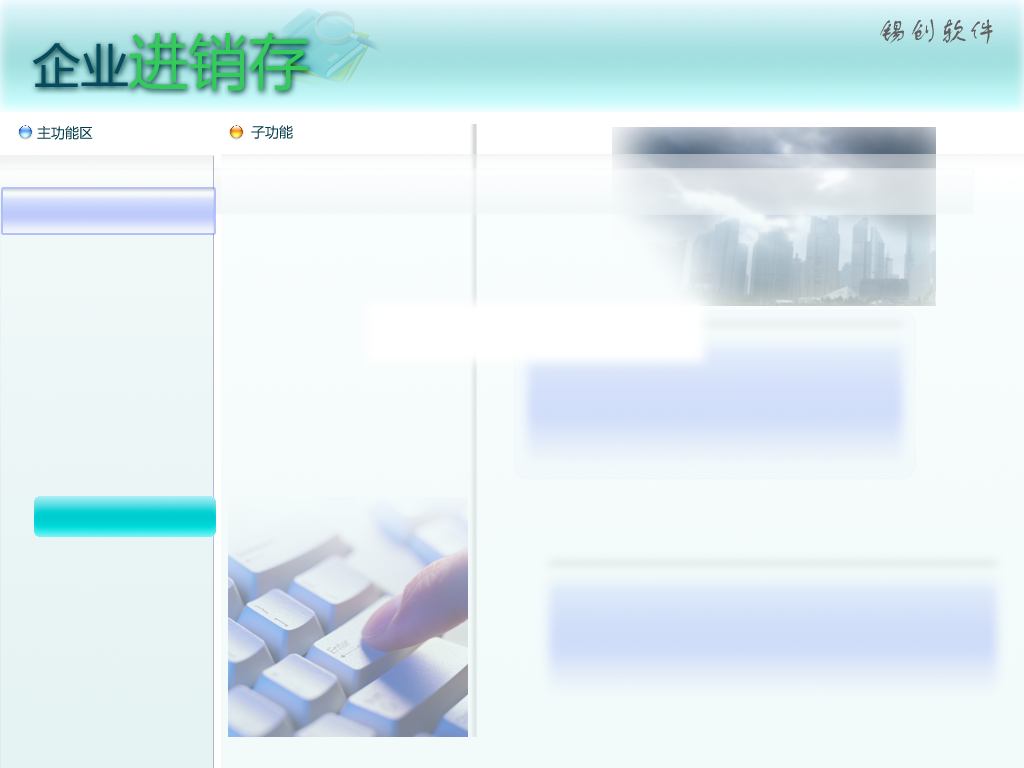
<style>
.page{position:relative;width:1024px;height:768px}
.page>*{position:absolute;margin:0}
.t1{font:30px "FZSTK--GBK1-0";color:#606061}
.t2{font:60px "MicrosoftYaHei";color:#35ca5c}
.t3{font:48px "MicrosoftYaHei";color:#054b5d}
.t4{font:14px "MicrosoftYaHei";color:#033b49}
</style>
<div class="page">
<p class="t1" style="left:879px;top:19px;width:114px;height:25px">锡创软件</p>
<p class="t2" style="left:32px;top:32px;width:276px;height:59px"><span class="t3">企业</span>进销存</p>
<p class="t4" style="left:37px;top:126px;width:56px;height:14px">主功能区</p>
<p class="t4" style="left:251px;top:125px;width:42px;height:14px">子功能</p>
</div>
